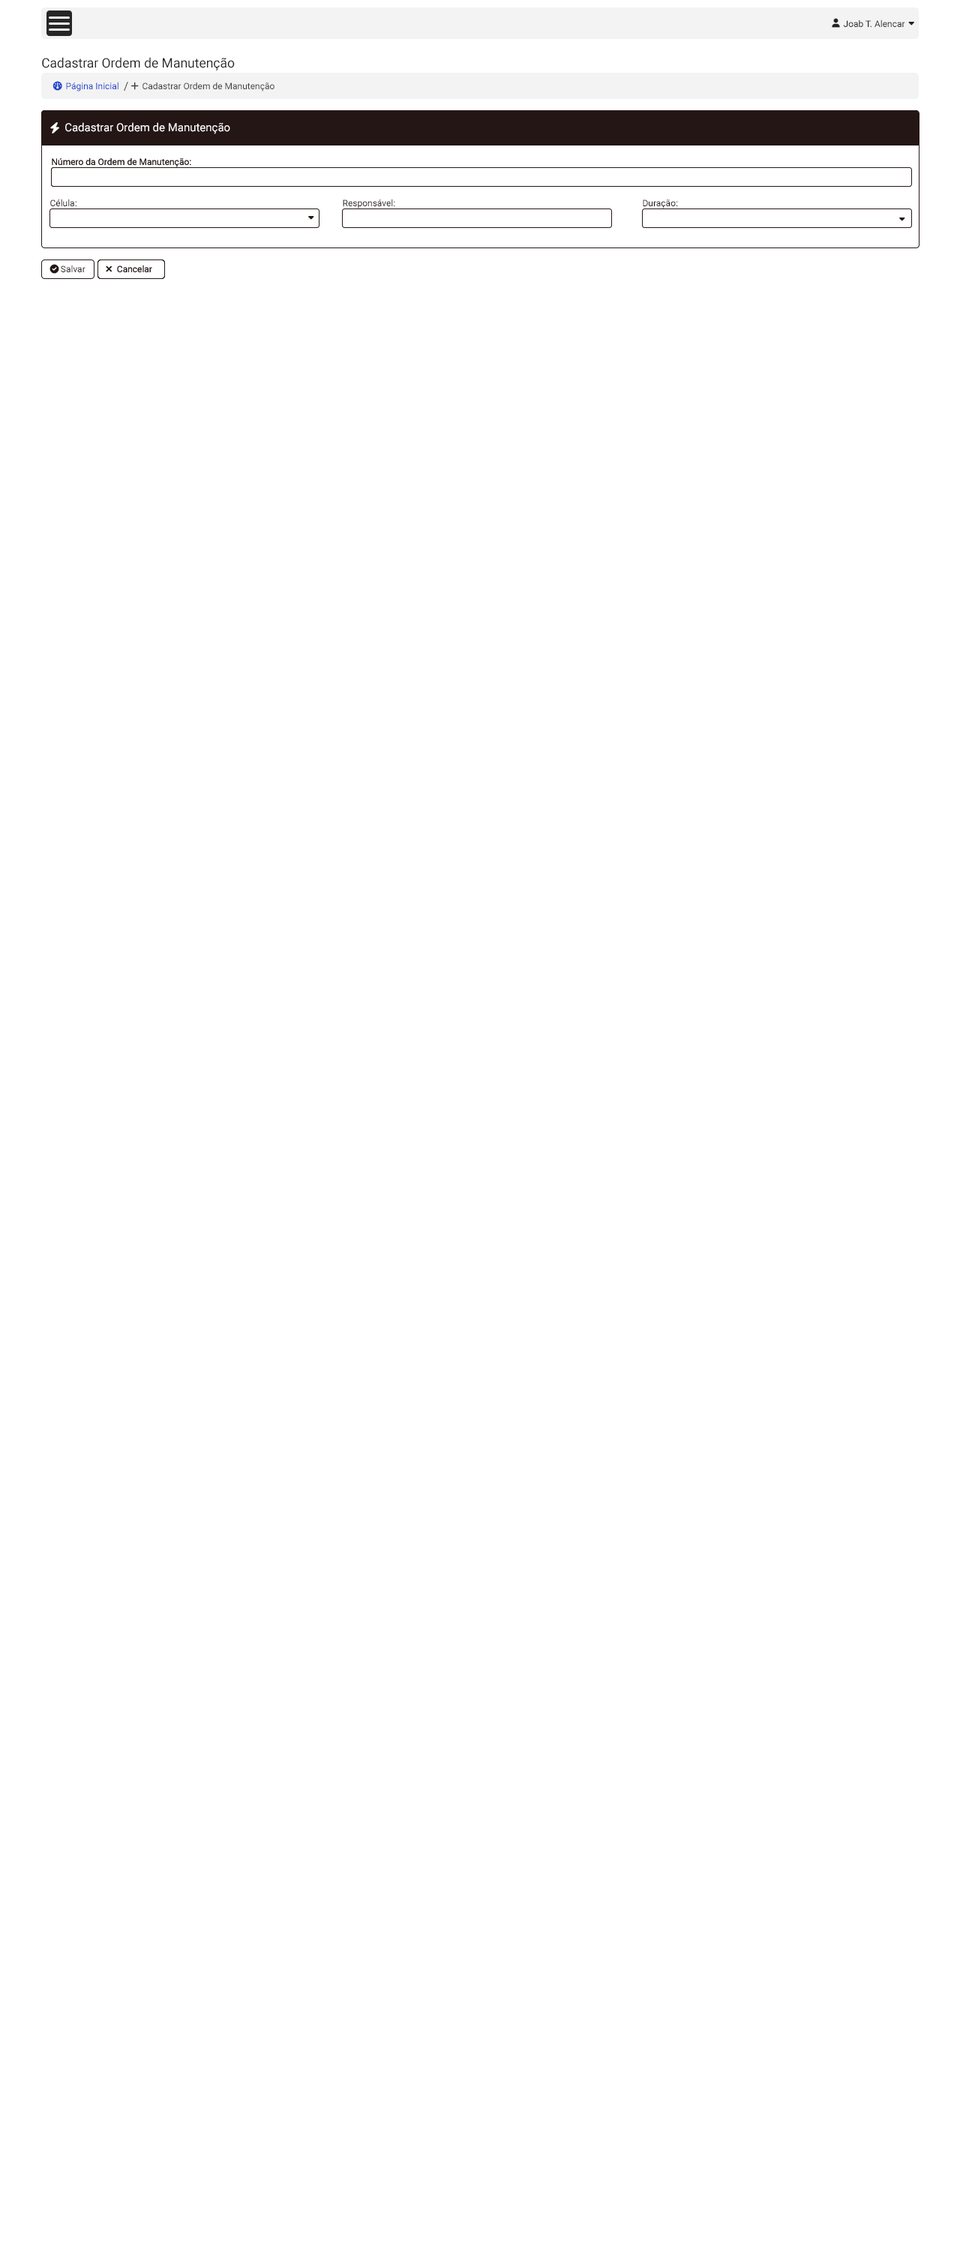
<style>
.page{position:relative;width:960px;height:2250px;background:#ffffff}
.page>*{position:absolute;margin:0}
.t1{font:9px "Roboto-Regular";color:#242424}
.t2{font:13.1px "Roboto-Regular";color:#242424}
.t3{font:9px "Roboto-Regular";color:#2044ce}
.t4{font:11.2px "Roboto-Regular";color:#3f3e3e}
.t5{font:9px "Roboto-Regular";color:#3f3e3e}
.t6{font:11.2px "Roboto-Regular";color:#ffffff}
.t7{font:9px "Roboto-Regular";color:#251616}
</style>
<div class="page">
<p class="t1" style="left:843px;top:20px;width:62px;height:7px">Joab T. Alencar</p>
<p class="t2" style="left:42px;top:57px;width:193px;height:13px">Cadastrar Ordem de Manutenção</p>
<p class="t3" style="left:66px;top:82px;width:52px;height:10px">Página Inicial</p>
<p class="t4" style="left:124px;top:82px;width:4px;height:9px">/</p>
<p class="t5" style="left:142px;top:82px;width:132px;height:10px">Cadastrar Ordem de Manutenção</p>
<p class="t6" style="left:65px;top:122px;width:165px;height:12px">Cadastrar Ordem de Manutenção</p>
<p class="t7" style="left:52px;top:158px;width:139px;height:9px">Número da Ordem de Manutenção:</p>
<p class="t7" style="left:52px;top:158px;width:139px;height:9px">Número da Ordem de Manutenção:</p>
<p class="t7" style="left:50px;top:199px;width:26px;height:7px">Célula:</p>
<p class="t7" style="left:343px;top:199px;width:52px;height:9px">Responsável:</p>
<p class="t7" style="left:643px;top:200px;width:35px;height:8px">Duração:</p>
<p class="t7" style="left:61px;top:265px;width:25px;height:7px">Salvar</p>
<p class="t7" style="left:117px;top:265px;width:35px;height:7px">Cancelar</p>
<p class="t7" style="left:117px;top:265px;width:35px;height:7px">Cancelar</p>
</div>
